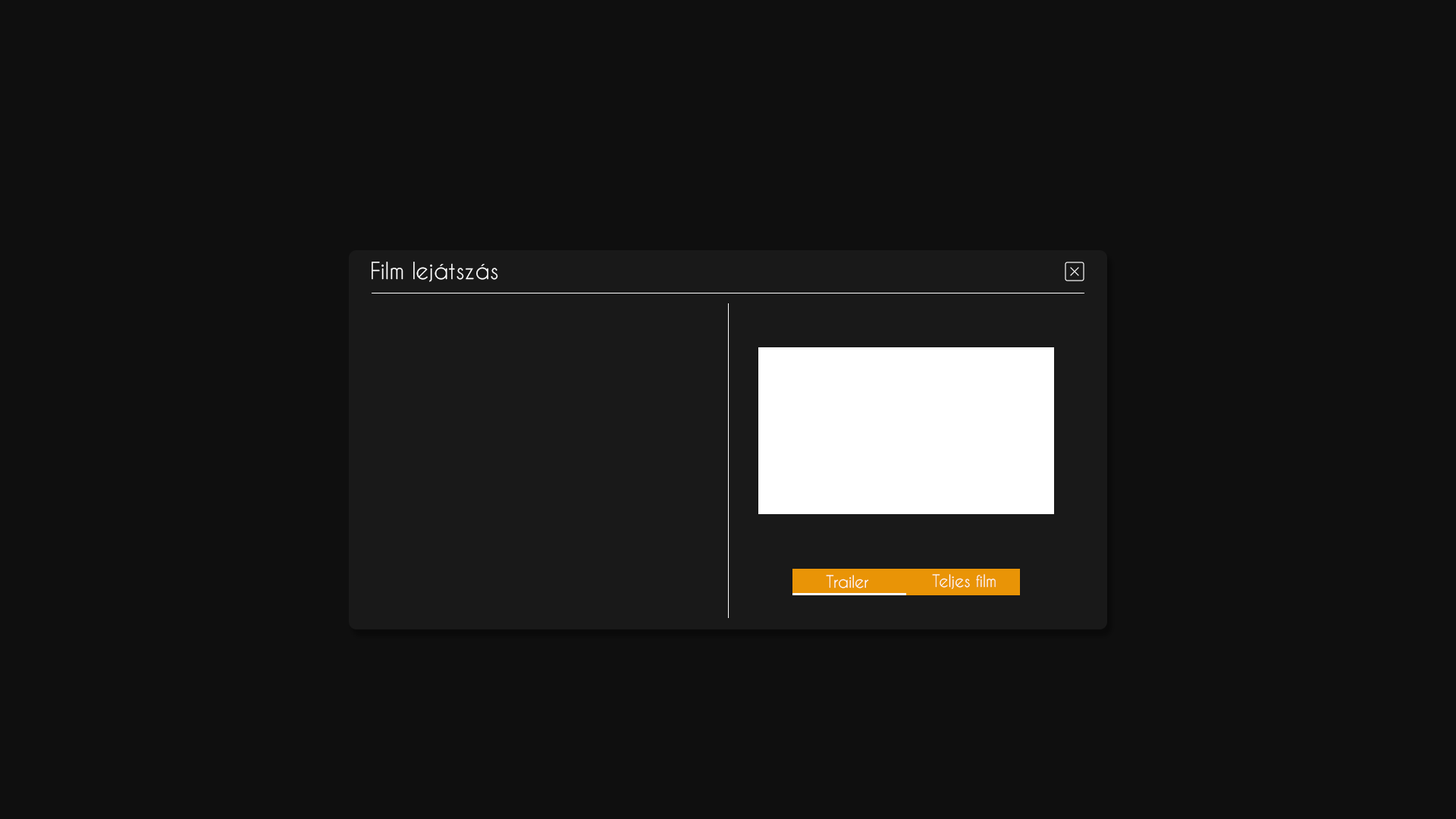
<style>
.page{position:relative;width:1456px;height:819px;background:#0f0f0f}
.page>*{position:absolute;margin:0}
.t1{font:22.1px "CaviarDreams";color:#ffffff}
.t2{font:15.8px "CaviarDreams";color:#ffffff}
</style>
<div class="page">
<p class="t1" style="left:372px;top:262px;width:126px;height:20px">Film lejátszás</p>
<p class="t2" style="left:826px;top:575px;width:43px;height:13px">Trailer</p>
<p class="t2" style="left:932px;top:574px;width:64px;height:15px">Teljes film</p>
</div>
